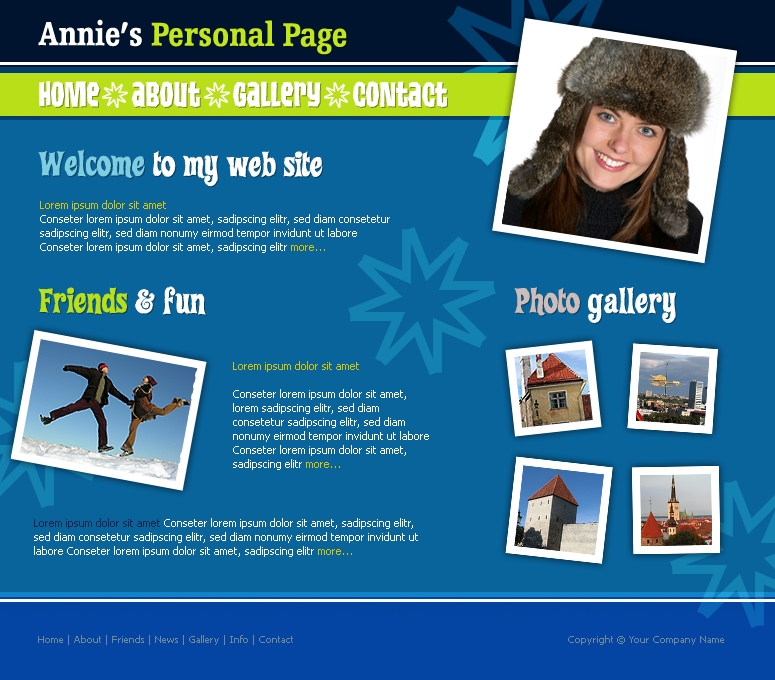
<style>
.page{position:relative;width:775px;height:680px;background:#08649b}
.page>*{position:absolute;margin:0}
.t1{font:34.6px "HumanistSlabserif712BT-Black";color:#c3e618;scale:0.8 1}
.t2{font:34.6px "HumanistSlabserif712BT-Black";color:#ffffff;scale:0.8 1}
.t3{font:34.6px "TikiIsland";color:#ffffff;scale:0.94 1}
.t4{font:34.6px "TikiSurf";color:#ffffff;scale:0.94 1}
.t5{font:34.6px "TikiSurf";color:#7fcde1;scale:0.94 1}
.t6{font:11px/14px "Tahoma";color:#ffffff}
.t7{font:11px/14px "Tahoma";color:#d7c503}
.t8{font:34.6px "TikiSurf";color:#b9df18;scale:0.94 1}
.t9{font:34.6px "TikiSurf";color:#cebcb8;scale:0.94 1}
.t10{font:11px/14px "Tahoma";color:#0b254a}
.t11{font:10px "Tahoma";color:#738b96}
</style>
<div class="page">
<p class="t1" style="left:38px;top:19px;width:309px;height:36px"><span class="t2">Annie’s</span> Personal Page</p>
<p class="t3" style="left:39px;top:81px;width:61px;height:26px">home</p>
<p class="t3" style="left:131px;top:81px;width:69px;height:27px">about</p>
<p class="t3" style="left:233px;top:81px;width:88px;height:26px">gallery</p>
<p class="t3" style="left:353px;top:81px;width:94px;height:27px">contact</p>
<p class="t4" style="left:38px;top:149px;width:285px;height:38px"><span class="t5">Welcome</span> to my web site</p>
<p class="t6" style="left:40px;top:200px;width:350px;height:53px"><span class="t7">Lorem ipsum dolor sit amet<br></span>Conseter lorem ipsum dolor sit amet, sadipscing elitr, sed diam consetetur sadipscing elitr, sed diam nonumy eirmod tempor invidunt ut labore Conseter lorem ipsum dolor sit amet, sadipscing elitr <span class="t7">more...</span></p>
<p class="t8" style="left:38px;top:286px;width:168px;height:29px">Friends <span class="t4">&amp; fun</span></p>
<p class="t4" style="left:514px;top:286px;width:162px;height:38px"><span class="t9">Photo </span>gallery</p>
<p class="t6" style="left:233px;top:361px;width:196px;height:109px"><span class="t7">Lorem ipsum dolor sit amet<br><br></span>Conseter lorem ipsum dolor sit amet, lorem sadipscing elitr, sed diam consetetur sadipscing elitr, sed diam nonumy eirmod tempor invidunt ut labore Conseter lorem ipsum dolor sit amet, sadipscing elitr <span class="t7">more...</span></p>
<p class="t6" style="left:34px;top:518px;width:384px;height:39px"><span class="t10">Lorem ipsum dolor sit amet </span>Conseter lorem ipsum dolor sit amet, sadipscing elitr, sed diam consetetur sadipscing elitr, sed diam nonumy eirmod tempor invidunt ut labore Conseter lorem ipsum dolor sit amet, sadipscing elitr <span class="t7">more...</span></p>
<p class="t11" style="left:38px;top:635px;width:255px;height:10px">Home | About | Friends | News | Gallery | Info | Contact</p>
<p class="t11" style="left:568px;top:635px;width:156px;height:10px">Copyright © Your Company Name</p>
</div>
